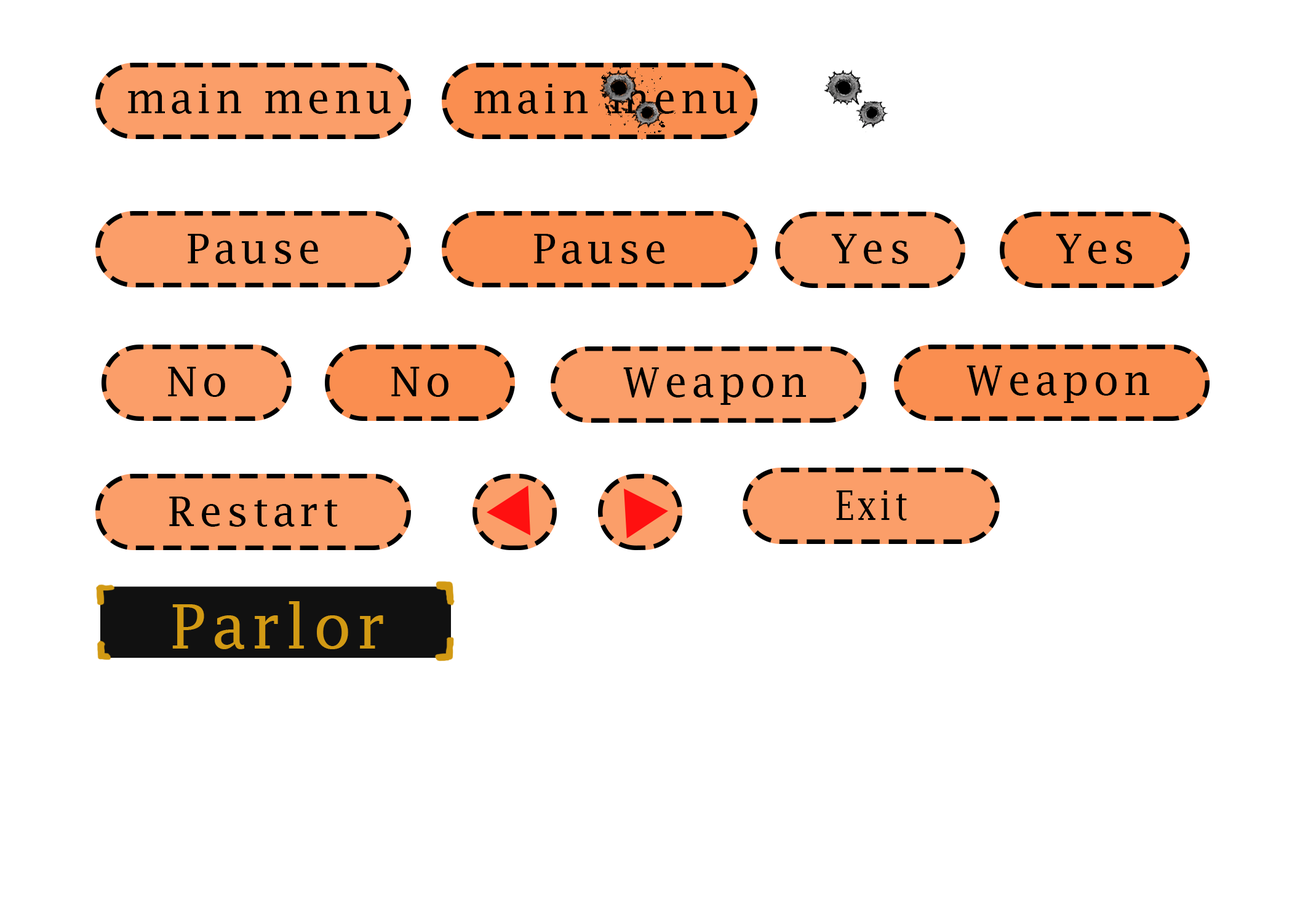
<style>
.page{position:relative;width:1292px;height:923px;background:#ffffff}
.page>*{position:absolute;margin:0}
.t1{font:41px "LucidaFax";letter-spacing:0.1em;color:#000000}
.t2{font:41.1px "LucidaFax";letter-spacing:0.1em;color:#000000}
.t3{font:40.9px "LucidaFax";letter-spacing:0.1em;color:#000000}
.t4{font:40.9px "LucidaFax";letter-spacing:0.1em;color:#000000;scale:0.82 1}
.t5{font:61.3px "LucidaFax";letter-spacing:0.1em;color:#d29a14}
</style>
<div class="page">
<p class="t1" style="left:128px;top:84px;width:263px;height:30px;text-align:center">main menu<br>æææ</p>
<p class="t2" style="left:474px;top:84px;width:263px;height:30px;text-align:center">main menu<br>æææ</p>
<p class="t1" style="left:188px;top:234px;width:130px;height:30px">Pause</p>
<p class="t3" style="left:534px;top:234px;width:130px;height:30px">Pause</p>
<p class="t1" style="left:831px;top:234px;width:77px;height:30px">Yes</p>
<p class="t1" style="left:1056px;top:234px;width:76px;height:30px">Yes</p>
<p class="t2" style="left:967px;top:365px;width:182px;height:38px;text-align:center">Weapon<br>æææ</p>
<p class="t1" style="left:168px;top:367px;width:57px;height:30px">No</p>
<p class="t1" style="left:391px;top:367px;width:58px;height:30px">No</p>
<p class="t2" style="left:623px;top:367px;width:183px;height:38px;text-align:center">Weapon<br>æææ</p>
<p class="t3" style="left:169px;top:497px;width:168px;height:30px">Restart</p>
<p class="t4" style="left:836px;top:490px;width:71px;height:31px">Exit</p>
<p class="t5" style="left:172px;top:601px;width:211px;height:48px;text-align:center">Parlor<br>ærlor</p>
</div>
